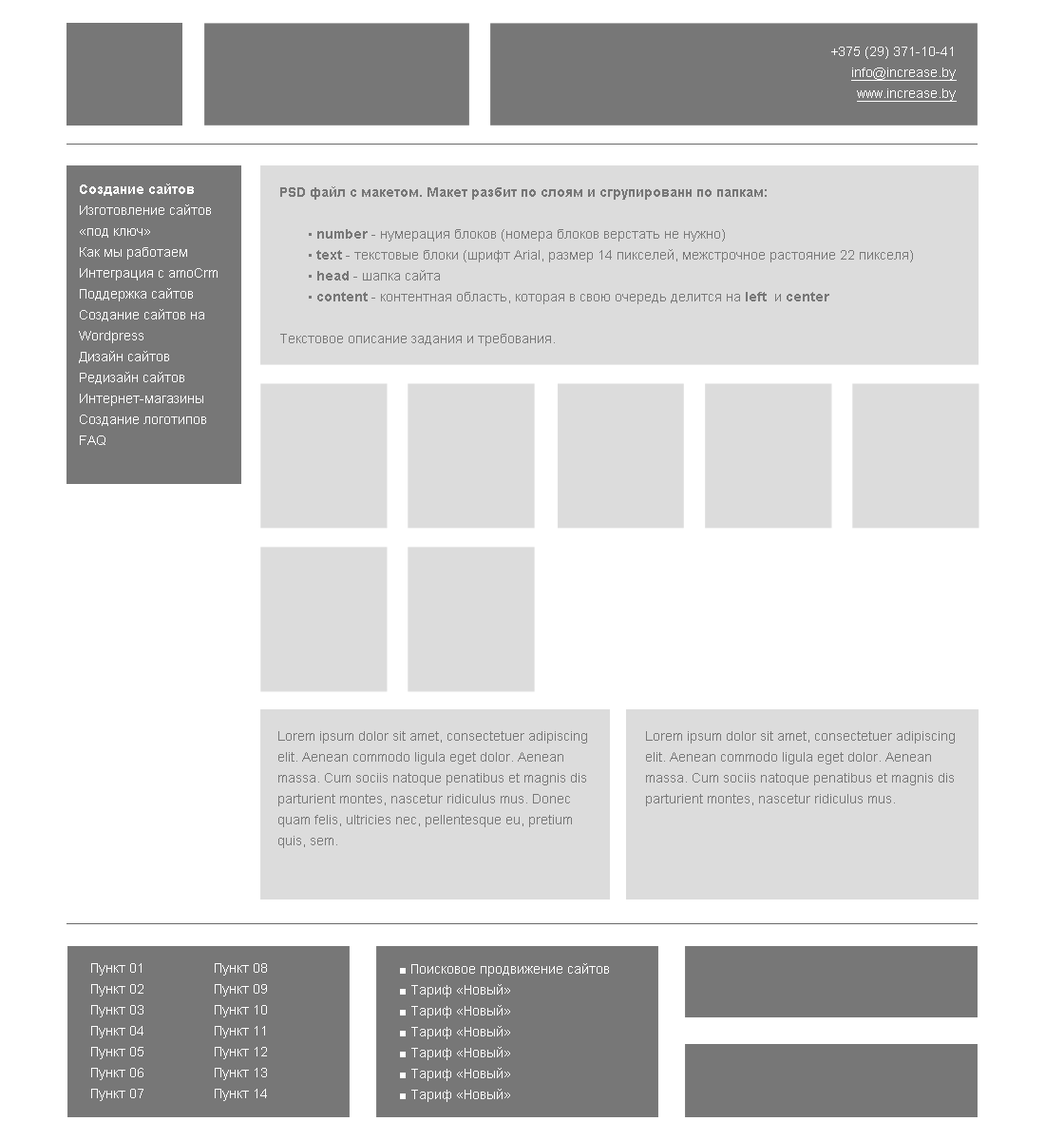
<style>
.page{position:relative;width:1045px;height:1141px;background:#ffffff}
.page>*{position:absolute;margin:0}
.t1{font:13.3px/20.9px "ArialMT";color:#ffffff;text-decoration:underline}
.t2{font:13.3px/20.9px "ArialMT";color:#ffffff}
.t3{font:13.3px/20.9px "Arial-BoldMT";color:#ffffff}
.t4{font:13.3px/20.9px "ArialMT";color:#777777}
.t5{font:13.3px/20.9px "Arial-BoldMT";color:#777777}
</style>
<div class="page">
<p class="t1" style="left:832px;top:47px;width:125px;height:55px;text-align:right"><span class="t2"><br>+375 (29) 371-10-41<br></span>info@increase.by<br>www.increase.by</p>
<p class="t2" style="left:79px;top:183px;width:139px;height:262px"><span class="t3">Создание сайтов<br></span>Изготовление сайтов «под ключ»<br>Как мы работаем<br>Интеграция с amoCrm<br>Поддержка сайтов<br>Создание сайтов на <br>Wordpress<br>Дизайн сайтов<br>Редизайн сайтов<br>Интернет-магазины<br>Создание логотипов<br>FAQ</p>
<p class="t4" style="left:280px;top:186px;width:633px;height:160px"><span class="t5">PSD файл с макетом. Макет разбит по слоям и сгрупированн по папкам: <br></span><br>• <span class="t5">number </span>- нумерация блоков (номера блоков верстать не нужно)<br>• <span class="t5">text </span>- текстовые блоки (шрифт Arial, размер 14 пикселей, межстрочное растояние 22 пикселя)<br>• <span class="t5">head </span>- шапка сайта<br>• <span class="t5">content </span>- контентная область, которая в свою очередь делится на <span class="t5">left  </span>и <span class="t5">center </span><br><br>Текстовое описание задания и требования.</p>
<p class="t4" style="left:278px;top:731px;width:309px;height:117px">Lorem ipsum dolor sit amet, consectetuer adipiscing elit. Aenean commodo ligula eget dolor. Aenean massa. Cum sociis natoque penatibus et magnis dis parturient montes, nascetur ridiculus mus. Donec quam felis, ultricies nec, pellentesque eu, pretium quis, sem.</p>
<p class="t4" style="left:646px;top:731px;width:309px;height:75px">Lorem ipsum dolor sit amet, consectetuer adipiscing elit. Aenean commodo ligula eget dolor. Aenean massa. Cum sociis natoque penatibus et magnis dis parturient montes, nascetur ridiculus mus.</p>
<p class="t2" style="left:91px;top:963px;width:53px;height:138px">Пункт 01<br>Пункт 02<br>Пункт 03<br>Пункт 04<br>Пункт 05<br>Пункт 06<br>Пункт 07</p>
<p class="t2" style="left:215px;top:963px;width:52px;height:138px">Пункт 08<br>Пункт 09<br>Пункт 10<br>Пункт 11<br>Пункт 12<br>Пункт 13<br>Пункт 14</p>
<p class="t2" style="left:400px;top:963px;width:209px;height:139px">■ Поисковое продвижение сайтов<br>■ Тариф «Новый»<br>■ Тариф «Новый»<br>■ Тариф «Новый»<br>■ Тариф «Новый»<br>■ Тариф «Новый»<br>■ Тариф «Новый»</p>
</div>
